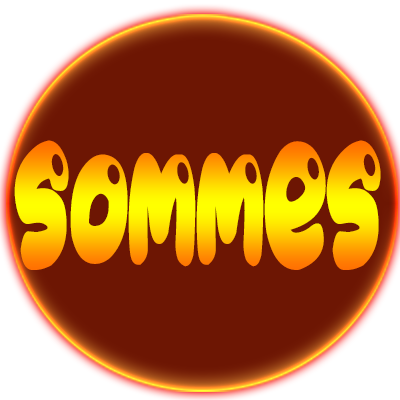
<style>
.page{position:relative;width:400px;height:400px;background:#6d1603}
.page>*{position:absolute;margin:0}
.t1{font:135px "JuicyFruity";scale:0.49 1}
</style>
<div class="page">
<p class="t1" style="left:14px;top:140px;width:367px;height:130px">sommes</p>
</div>
